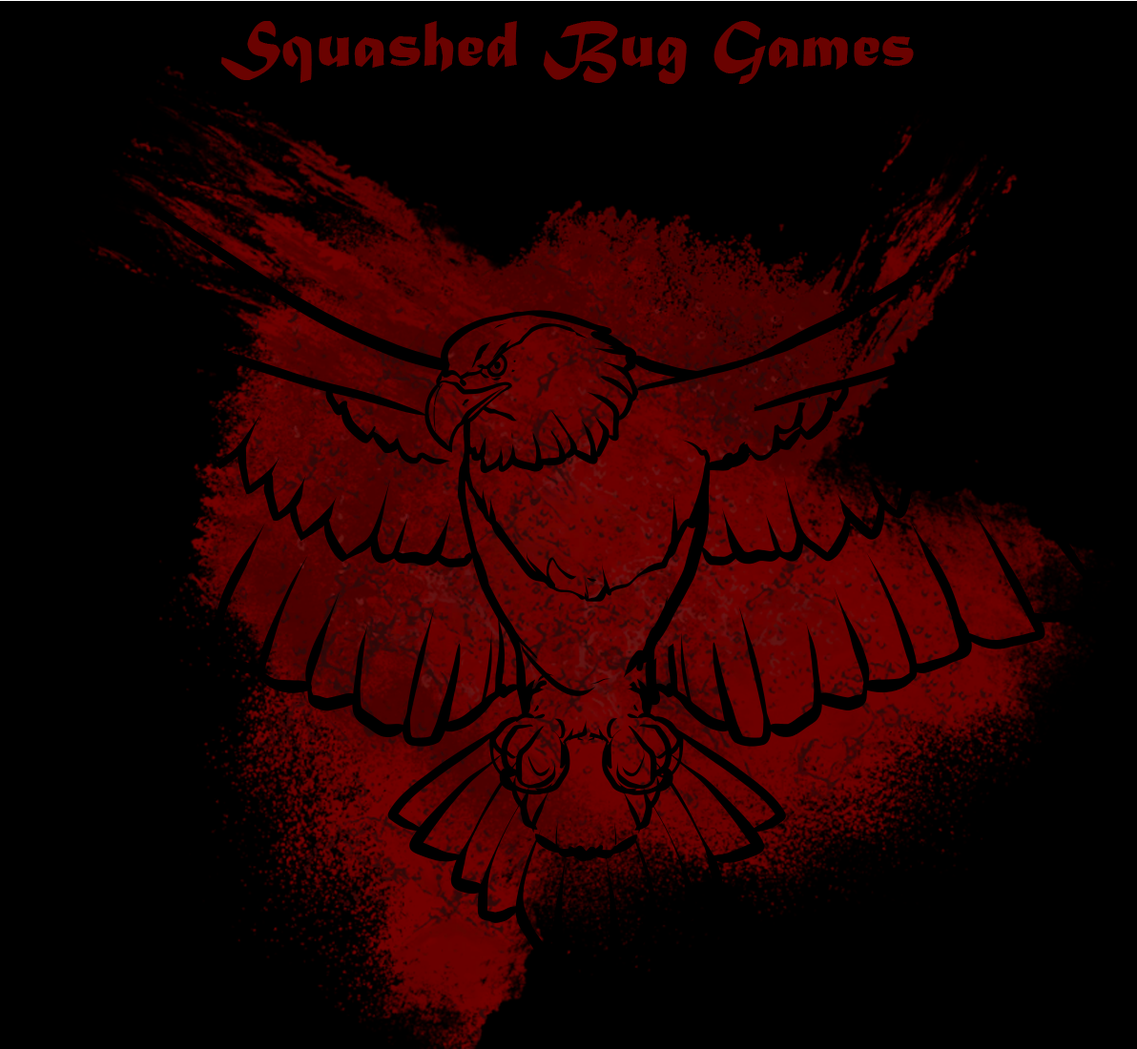
<style>
.page{position:relative;width:1137px;height:1049px;background:#000000}
.page>*{position:absolute;margin:0}
.t1{font:68.7px "MaturaMTScriptCapitals";letter-spacing:0.01em;color:#6a0200}
</style>
<div class="page">
<p class="t1" style="left:221px;top:21px;width:693px;height:63px">Squashed Bug Games</p>
</div>
